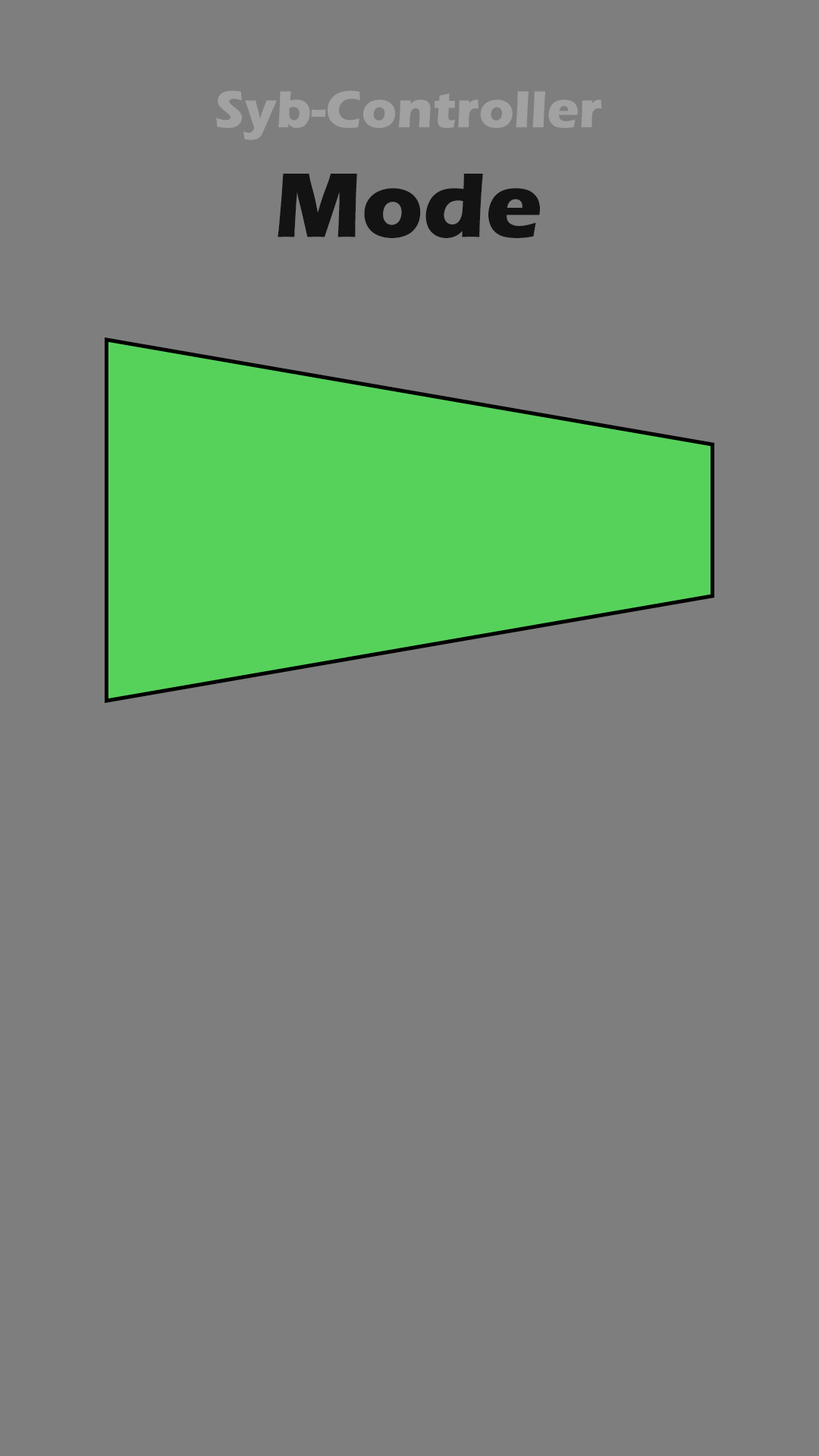
<style>
.page{position:relative;width:819px;height:1456px;background:#7e7e7e}
.page>*{position:absolute;margin:0}
.t1{font:53.7px "ErasITC-Bold";color:#a1a1a1}
.t2{font:94.8px "ErasITC-Bold";color:#131313}
</style>
<div class="page">
<p class="t1" style="left:216px;top:90px;width:386px;height:50px">Syb-Controller</p>
<p class="t2" style="left:278px;top:174px;width:262px;height:64px">Mode</p>
</div>
